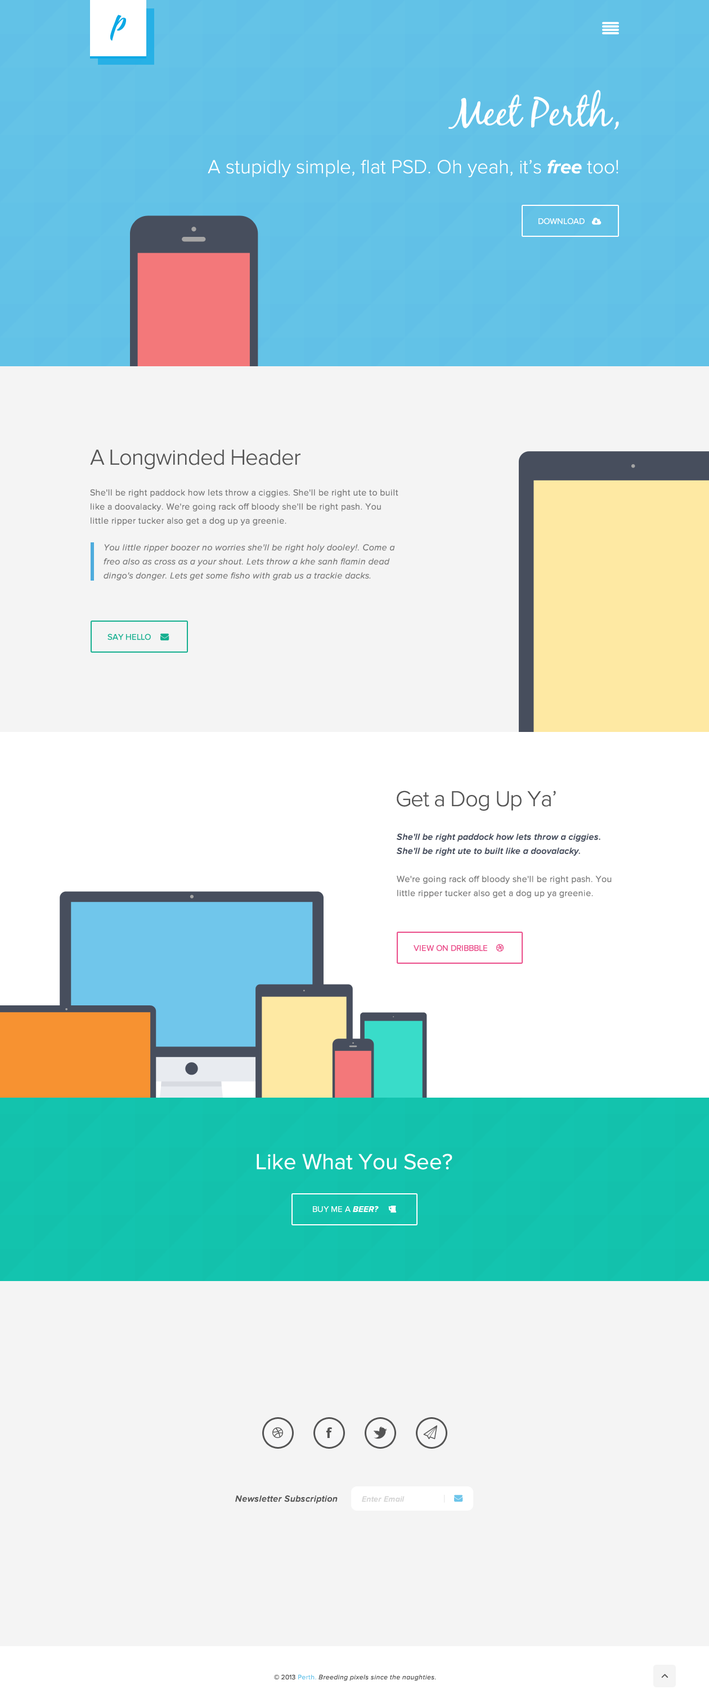
<style>
.page{position:relative;width:709px;height:1703px;background:#f4f4f4}
.page>*{position:absolute;margin:0}
.t1{font:28.1px "KaushanScript-Regular";color:#0da9e5}
.t2{font:39.4px "BlackJackRegular";color:#ffffff}
.t3{font:19.7px "ProximaNova-Light";color:#ffffff}
.t4{font:19.7px "ProximaNova-BoldIt";color:#ffffff}
.t5{font:8.4px "ProximaNova-Regular";color:#ffffff}
.t6{font:22.5px "ProximaNova-Light";letter-spacing:-0.025em;color:#545454}
.t7{font:9px/14.1px "ProximaNova-Regular";letter-spacing:0.025em;color:#7e7e7e}
.t8{font:9px/14.1px "ProximaNova-RegularIt";letter-spacing:0.025em;color:#7e7e7e}
.t9{font:8.4px "ProximaNova-Regular";color:#14af8f}
.t10{font:9px/14.1px "ProximaNova-SemiboldIt";letter-spacing:0.025em;color:#474e5d}
.t11{font:8.4px "ProximaNova-Regular";color:#ea4c89}
.t12{font:22.5px "ProximaNova-Regular";color:#ffffff}
.t13{font:8.4px "ProximaNova-Regular";color:#fffefe}
.t14{font:8.4px "ProximaNova-BoldIt";color:#fffefe}
.t15{font:9px "ProximaNova-SemiboldIt";letter-spacing:0.025em;color:#545454}
.t16{font:7.9px "ProximaNova-SemiboldIt";letter-spacing:0.025em;color:#d3d3d3}
.t17{font:6.8px "ProximaNova-RegularIt";letter-spacing:0.025em;color:#545454}
.t18{font:6.8px "ProximaNova-Regular";letter-spacing:0.025em;color:#545454}
.t19{font:6.8px "ProximaNova-Regular";letter-spacing:0.025em;color:#6dc5ea}
</style>
<div class="page">
<p class="t1" style="left:110px;top:15px;width:16px;height:26px">p</p>
<p class="t2" style="left:448px;top:89px;width:171px;height:40px">Meet Perth,</p>
<p class="t3" style="left:208px;top:160px;width:410px;height:17px">A stupidly simple, flat PSD. Oh yeah, it’s <span class="t4">free </span>too!</p>
<p class="t5" style="left:538px;top:218px;width:46px;height:6px">DOWNLOAD</p>
<p class="t6" style="left:90px;top:449px;width:210px;height:20px">A Longwinded Header</p>
<p class="t7" style="left:90px;top:489px;width:308px;height:36px">She'll be right paddock how lets throw a ciggies. She'll be right ute to built like a doovalacky. We're going rack off bloody she'll be right pash. You little ripper tucker also get a dog up ya greenie.</p>
<p class="t8" style="left:104px;top:544px;width:291px;height:36px">You little ripper boozer no worries she'll be right holy dooley!. Come a <br>freo also as cross as a your shout. Lets throw a khe sanh flamin dead <br>dingo's donger. Lets get some fisho with grab us a trackie dacks.</p>
<p class="t9" style="left:107px;top:633px;width:44px;height:7px">SAY HELLO</p>
<p class="t6" style="left:397px;top:790px;width:159px;height:21px">Get a Dog Up Ya’</p>
<p class="t7" style="left:397px;top:833px;width:214px;height:65px"><span class="t10">She'll be right paddock how lets throw a ciggies. <br>She'll be right ute to built like a doovalacky.<br></span><br>We're going rack off bloody she'll be right pash. You <br>little ripper tucker also get a dog up ya greenie.</p>
<p class="t11" style="left:413px;top:944px;width:74px;height:7px">VIEW ON DRIBBBLE</p>
<p class="t12" style="left:256px;top:1153px;width:196px;height:16px">Like What You See?</p>
<p class="t13" style="left:313px;top:1205px;width:66px;height:7px">BUY ME A <span class="t14">BEER?</span></p>
<p class="t15" style="left:235px;top:1495px;width:103px;height:9px">Newsletter Subscription</p>
<p class="t16" style="left:362px;top:1496px;width:42px;height:6px">Enter Email</p>
<p class="t17" style="left:274px;top:1674px;width:162px;height:7px"><span class="t18">© 2013 </span><span class="t19">Perth. </span>Breeding pixels since the naughties.</p>
</div>
